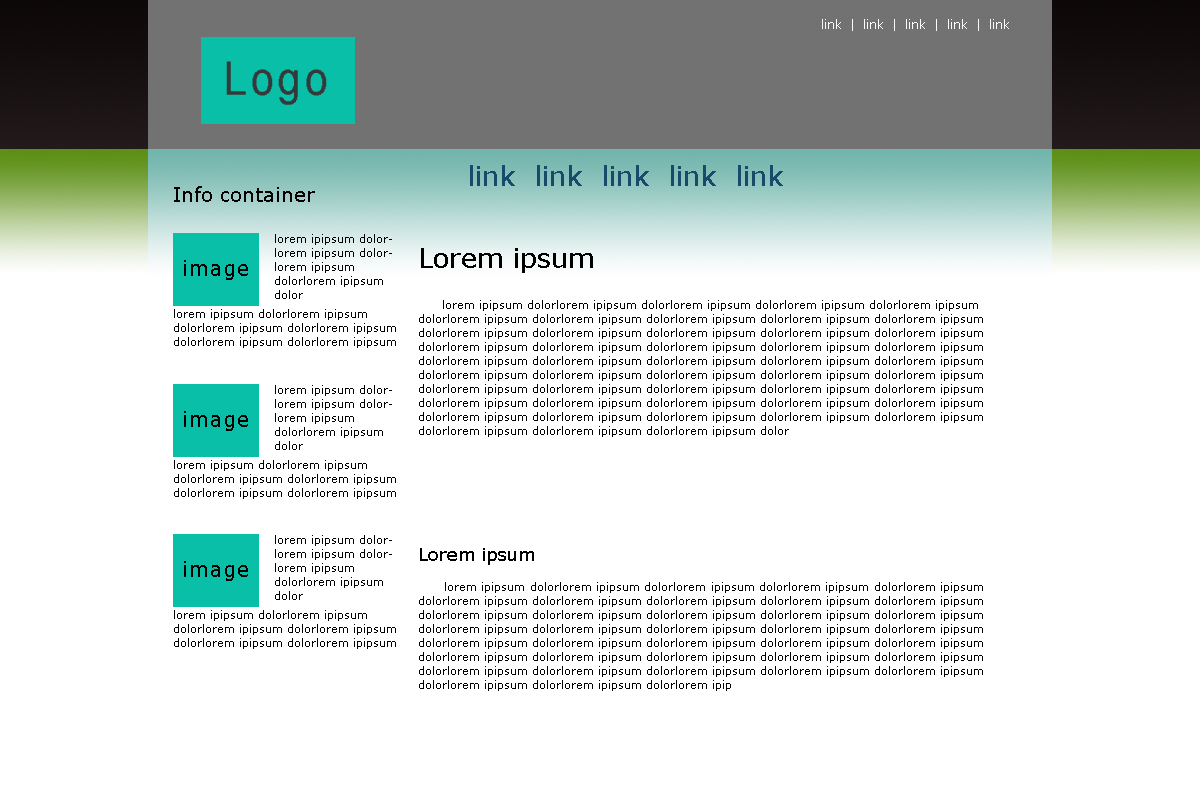
<style>
.page{position:relative;width:1200px;height:800px;background:#ffffff}
.page>*{position:absolute;margin:0}
.t1{font:12px "Verdana";color:#fefefe}
.t2{font:27px "Verdana";color:#164b69}
.t3{font:20px "Verdana";color:#000000}
.t4{font:11px/14px "Verdana";color:#000000}
.t5{font:27px "Verdana";color:#000000}
.t6{font:18px "Verdana";color:#000000}
</style>
<div class="page">
<p class="t1" style="left:822px;top:19px;width:187px;height:12px">link  |  link  |  link  |  link  |  link</p>
<p class="t2" style="left:470px;top:165px;width:313px;height:21px">link  link  link  link  link</p>
<p class="t3" style="left:174px;top:186px;width:141px;height:16px">Info container</p>
<p class="t4" style="left:275px;top:234px;width:117px;height:65px">lorem ipipsum dolorlorem ipipsum dolorlorem ipipsum dolorlorem ipipsum dolor</p>
<p class="t5" style="left:421px;top:248px;width:172px;height:25px">Lorem ipsum</p>
<p class="t4" style="left:419px;top:300px;width:564px;height:137px">lorem ipipsum dolorlorem ipipsum dolorlorem ipipsum dolorlorem ipipsum dolorlorem ipipsum dolorlorem ipipsum dolorlorem ipipsum dolorlorem ipipsum dolorlorem ipipsum dolorlorem ipipsum dolorlorem ipipsum dolorlorem ipipsum dolorlorem ipipsum dolorlorem ipipsum dolorlorem ipipsum dolorlorem ipipsum dolorlorem ipipsum dolorlorem ipipsum dolorlorem ipipsum dolorlorem ipipsum dolorlorem ipipsum dolorlorem ipipsum dolorlorem ipipsum dolorlorem ipipsum dolorlorem ipipsum dolorlorem ipipsum dolorlorem ipipsum dolorlorem ipipsum dolorlorem ipipsum dolorlorem ipipsum dolorlorem ipipsum dolorlorem ipipsum dolorlorem ipipsum dolorlorem ipipsum dolorlorem ipipsum dolorlorem ipipsum dolorlorem ipipsum dolorlorem ipipsum dolorlorem ipipsum dolorlorem ipipsum dolorlorem ipipsum dolorlorem ipipsum dolorlorem ipipsum dolorlorem ipipsum dolorlorem ipipsum dolorlorem ipipsum dolorlorem ipipsum dolorlorem ipipsum dolor</p>
<p class="t4" style="left:174px;top:309px;width:222px;height:39px">lorem ipipsum dolorlorem ipipsum dolorlorem ipipsum dolorlorem ipipsum dolorlorem ipipsum dolorlorem ipipsum dolor</p>
<p class="t4" style="left:275px;top:385px;width:117px;height:65px">lorem ipipsum dolorlorem ipipsum dolorlorem ipipsum dolorlorem ipipsum dolor</p>
<p class="t4" style="left:174px;top:460px;width:222px;height:39px">lorem ipipsum dolorlorem ipipsum dolorlorem ipipsum dolorlorem ipipsum dolorlorem ipipsum dolorlorem ipipsum dolor</p>
<p class="t4" style="left:275px;top:535px;width:117px;height:65px">lorem ipipsum dolorlorem ipipsum dolorlorem ipipsum dolorlorem ipipsum dolor</p>
<p class="t6" style="left:420px;top:548px;width:114px;height:17px">Lorem ipsum</p>
<p class="t4" style="left:419px;top:582px;width:564px;height:109px;text-align:justify">lorem ipipsum dolorlorem ipipsum dolorlorem ipipsum dolorlorem ipipsum dolorlorem ipipsum dolorlorem ipipsum dolorlorem ipipsum dolorlorem ipipsum dolorlorem ipipsum dolorlorem ipipsum dolorlorem ipipsum dolorlorem ipipsum dolorlorem ipipsum dolorlorem ipipsum dolorlorem ipipsum dolorlorem ipipsum dolorlorem ipipsum dolorlorem ipipsum dolorlorem ipipsum dolorlorem ipipsum dolorlorem ipipsum dolorlorem ipipsum dolorlorem ipipsum dolorlorem ipipsum dolorlorem ipipsum dolorlorem ipipsum dolorlorem ipipsum dolorlorem ipipsum dolorlorem ipipsum dolorlorem ipipsum dolorlorem ipipsum dolorlorem ipipsum dolorlorem ipipsum dolorlorem ipipsum dolorlorem ipipsum dolorlorem ipipsum dolorlorem ipipsum dolorlorem ipip</p>
<p class="t4" style="left:174px;top:610px;width:222px;height:39px">lorem ipipsum dolorlorem ipipsum dolorlorem ipipsum dolorlorem ipipsum dolorlorem ipipsum dolorlorem ipipsum dolor</p>
</div>
